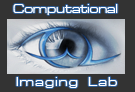
<style>
.page{position:relative;width:135px;height:92px;background:#333333}
.page>*{position:absolute;margin:0}
.t1{font:13.3px "MicrogrammaD-MediExte";color:#ffffff}
.t2{font:13.3px "MicrogrammaD-MediExte";letter-spacing:0.1em;color:#ffffff}
</style>
<div class="page">
<p class="t1" style="left:13px;top:4px;width:105px;height:11px">Computational</p>
<p class="t2" style="left:16px;top:77px;width:101px;height:11px">Imaging  Lab</p>
</div>
